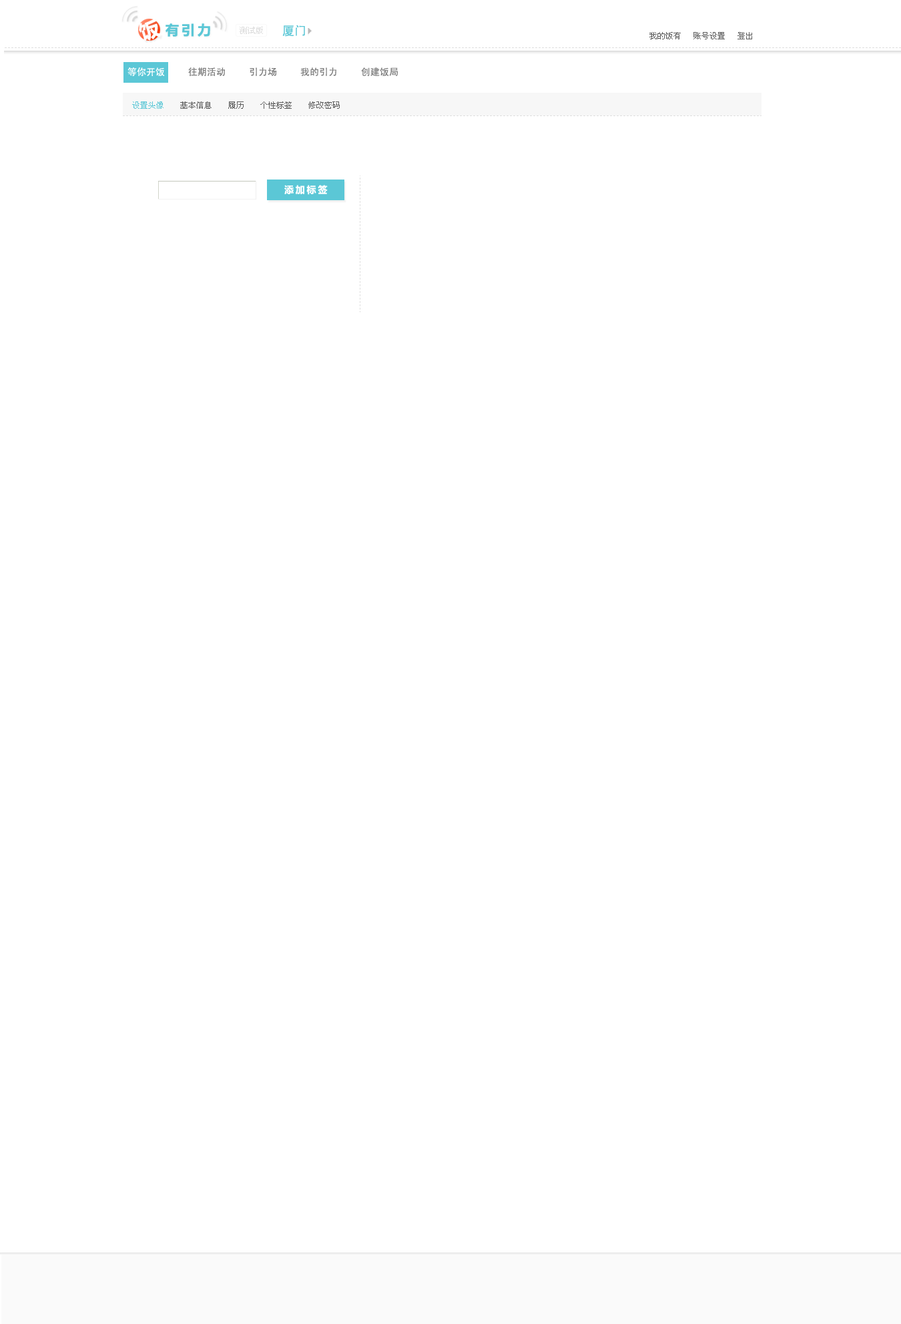
<style>
.page{position:relative;width:901px;height:1324px;background:#ffffff}
.page>*{position:absolute;margin:0}
.t1{font:20px "MicrosoftYaHei";letter-spacing:0.2em;color:#ffffff}
.t2{font:13.3px "MicrosoftYaHei";letter-spacing:0.2em;color:#5bc7d6}
.t3{font:12px "SimHei";color:#5bc7d6}
.t4{font:8px "SimSun";color:#5c5c5c}
.t5{font:9.3px "SimHei";color:#808080}
.t6{font:9.3px "SimHei";color:#ffffff}
.t7{font:8px "SimSun";color:#5bc7d6}
.t8{font:9.3px "MicrosoftYaHei";letter-spacing:0.2em;color:#ffffff}
</style>
<div class="page">
<p class="t1" style="left:139px;top:19px;width:22px;height:22px;rotate:-18deg">饭</p>
<p class="t2" style="left:165px;top:23px;width:45px;height:14px">有引力</p>
<p class="t3" style="left:282px;top:25px;width:23px;height:12px">厦门</p>
<p class="t4" style="left:649px;top:32px;width:103px;height:7px">我的饭有   账号设置   登出</p>
<p class="t5" style="left:127px;top:67px;width:271px;height:9px"><span class="t6">等你开饭     </span>往期活动     引力场     我的引力     创建饭局</p>
<p class="t4" style="left:132px;top:101px;width:208px;height:8px"><span class="t7">设置头像    </span>基本信息    履历    个性标签    修改密码</p>
<p class="t8" style="left:284px;top:185px;width:44px;height:10px">添加标签</p>
</div>
